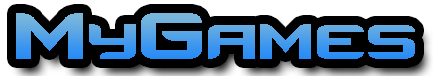
<style>
.page{position:relative;width:433px;height:76px;background:#000000}
.page>*{position:absolute;margin:0}
.t1{font:92px "CounterStrikeRegular"}
</style>
<div class="page">
<p class="t1" style="left:16px;top:13px;width:399px;height:46px">MyGames</p>
</div>
